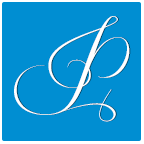
<style>
.page{position:relative;width:144px;height:144px;background:#008ed2}
.page>*{position:absolute;margin:0}
.t1{font:82.6px "Respective";letter-spacing:-0.01em;color:#ffffff}
</style>
<div class="page">
<p class="t1" style="left:14px;top:16px;width:116px;height:106px">P</p>
</div>
